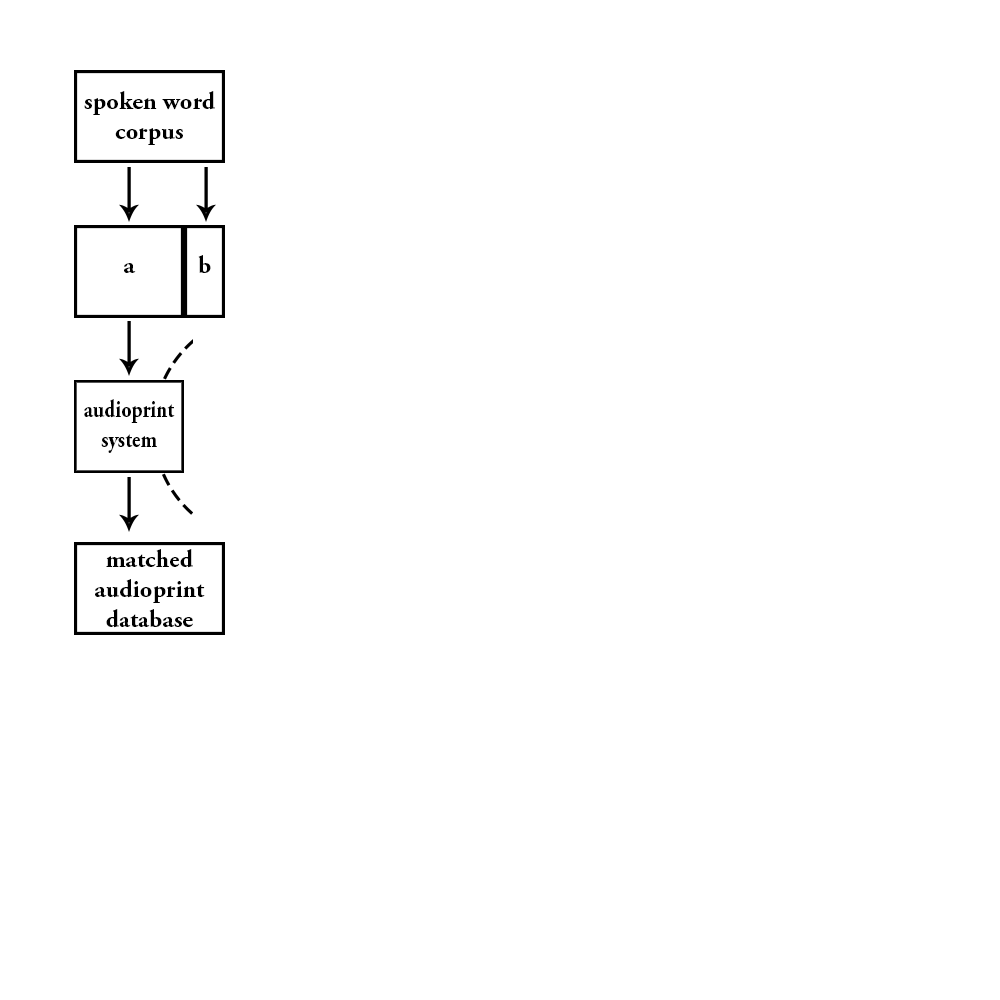
<style>
.page{position:relative;width:1000px;height:1000px;background:#ffffff}
.page>*{position:absolute;margin:0}
.t1{font:25px "AGaramondPro-Bold";color:#000000}
.t2{font:25px "AGaramondPro-Bold";color:#000000;scale:0.82 1}
</style>
<div class="page">
<p class="t1" style="left:84px;top:91px;width:131px;height:54px;text-align:center">spoken word corpus</p>
<p class="t1" style="left:198px;top:255px;width:13px;height:18px">b</p>
<p class="t1" style="left:124px;top:263px;width:12px;height:10px">a</p>
<p class="t2" style="left:84px;top:399px;width:91px;height:54px;text-align:center">audioprint<br>system</p>
<p class="t1" style="left:95px;top:549px;width:110px;height:79px;text-align:center">matched <br>audioprint<br>database</p>
</div>
